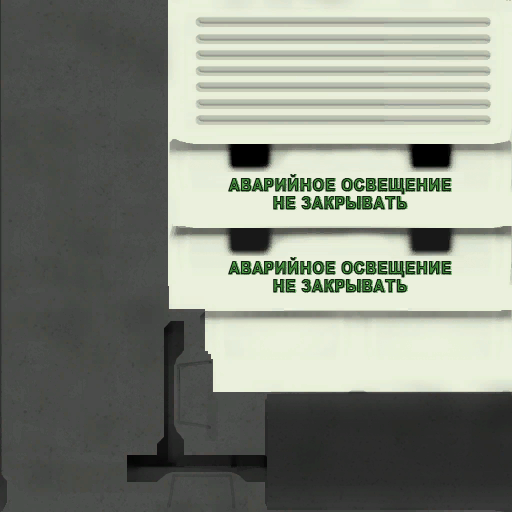
<style>
.page{position:relative;width:512px;height:512px}
.page>*{position:absolute;margin:0}
.t1{font:18px/18px "Arial-Black";font-weight:bold;scale:0.81 1}
</style>
<div class="page">
<p class="t1" style="left:228px;top:174px;width:223px;height:36px;text-align:center">АВАРИЙНОЕ ОСВЕЩЕНИЕ<br>НЕ ЗАКРЫВАТЬ</p>
<p class="t1" style="left:228px;top:257px;width:223px;height:36px;text-align:center">АВАРИЙНОЕ ОСВЕЩЕНИЕ<br>НЕ ЗАКРЫВАТЬ</p>
</div>
